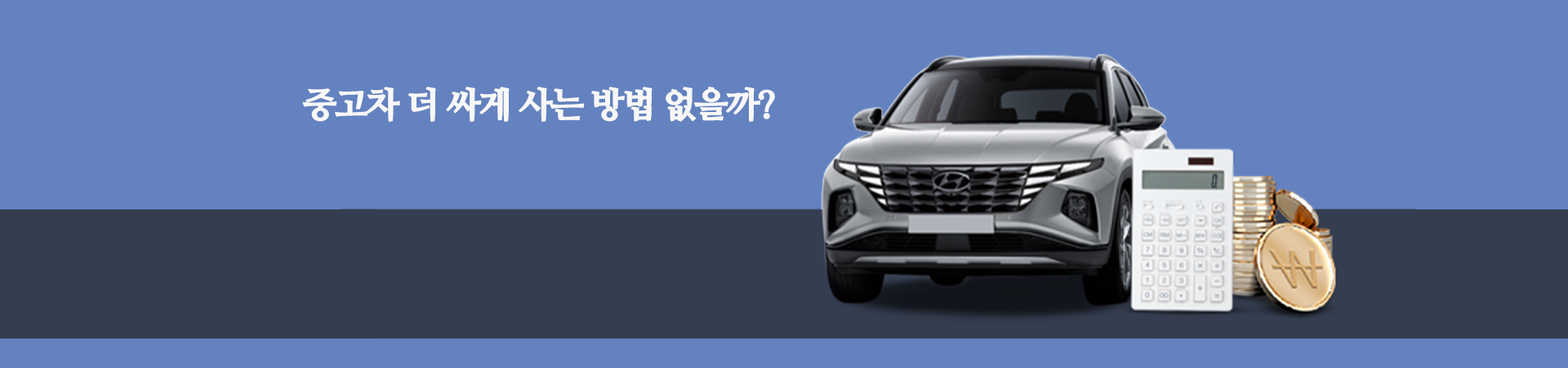
<style>
.page{position:relative;width:1568px;height:368px;background:#6382bf}
.page>*{position:absolute;margin:0}
.t1{font:35px "NanumMyeongjoExtraBold";letter-spacing:-0.075em;color:#f7f7f7;font-weight:bold}
</style>
<div class="page">
<p class="t1" style="left:302px;top:87px;width:473px;height:35px">중고차 더 싸게 사는 방법 없을까?</p>
</div>
